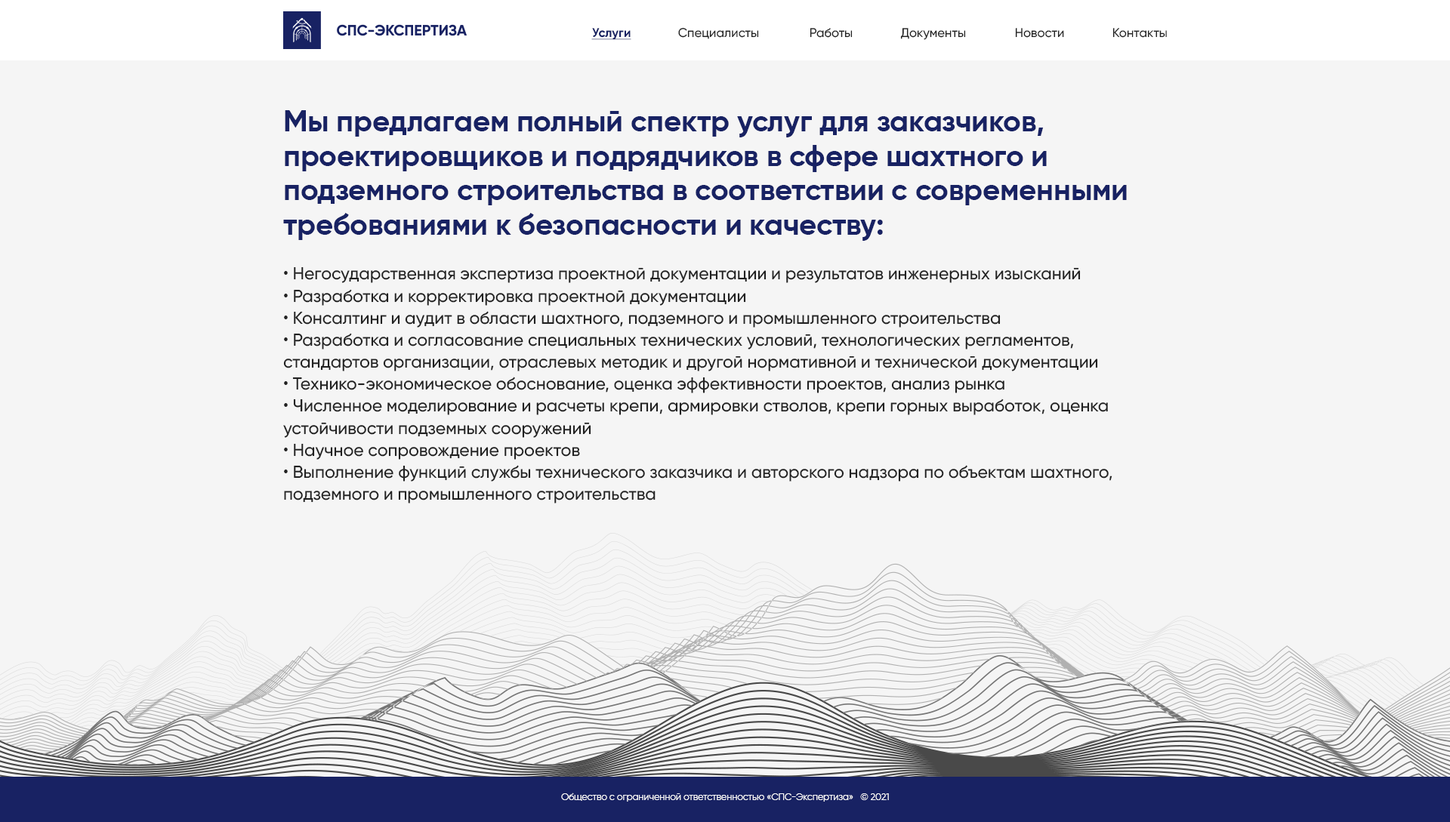
<style>
.page{position:relative;width:1450px;height:822px;background:#f5f5f5}
.page>*{position:absolute;margin:0}
.t1{font:12.6px "Gilroy-Bold";color:#182263;text-decoration:underline}
.t2{font:12.6px "Gilroy-Medium";color:#212121}
.t3{font:12.6px "Gilroy-Medium";color:#212121;text-transform:uppercase}
.t4{font:29.9px/34.6px "Gilroy-Bold";color:#182263}
.t5{font:17.3px/22px "Gilroy-Regular";color:#212121}
.t6{font:17.3px/22px "Gilroy-Medium";color:#212121}
.t7{font:9.4px "Gilroy-Regular";color:#ffffff}
</style>
<div class="page">
<p class="t1" style="left:591px;top:28px;width:40px;height:12px">Услуги</p>
<p class="t2" style="left:678px;top:27px;width:81px;height:12px">Специалисты</p>
<p class="t2" style="left:810px;top:28px;width:43px;height:10px">Работы</p>
<p class="t2" style="left:900px;top:28px;width:66px;height:12px"><span class="t3">д</span>окументы</p>
<p class="t2" style="left:1015px;top:28px;width:49px;height:10px"><span class="t3">н</span>овости</p>
<p class="t2" style="left:1112px;top:28px;width:55px;height:10px"><span class="t3">к</span>онтакты</p>
<p class="t4" style="left:283px;top:110px;width:844px;height:394px">Мы предлагаем полный спектр услуг для заказчиков, проектировщиков и подрядчиков в сфере шахтного и подземного строительства в соответствии с современными требованиями к безопасности и качеству:<br><br><span class="t5">• </span><span class="t6">Негосударственная экспертиза проектной документации и результатов инженерных изысканий<br></span><span class="t5">• </span><span class="t6">Разработка и корректировка проектной документации<br></span><span class="t5">• </span><span class="t6">Консалтинг и аудит в области шахтного, подземного и промышленного строительства<br></span><span class="t5">• </span><span class="t6">Разработка и согласование специальных технических условий, технологических регламентов, стандартов организации, отраслевых методик и другой нормативной и технической документации<br></span><span class="t5">• </span><span class="t6">Технико-экономическое обоснование, оценка эффективности проектов, анализ рынка<br></span><span class="t5">• </span><span class="t6">Численное моделирование и расчеты крепи, армировки стволов, крепи горных выработок, оценка устойчивости подземных сооружений<br></span><span class="t5">• </span><span class="t6">Научное сопровождение проектов<br></span><span class="t5">• </span><span class="t6">Выполнение функций службы технического заказчика и авторского надзора по объектам шахтного, подземного и промышленного строительства</span></p>
<p class="t7" style="left:561px;top:793px;width:328px;height:9px">Общество с ограниченной ответственностью «СПС-Экспертиза»   © 2021</p>
</div>
